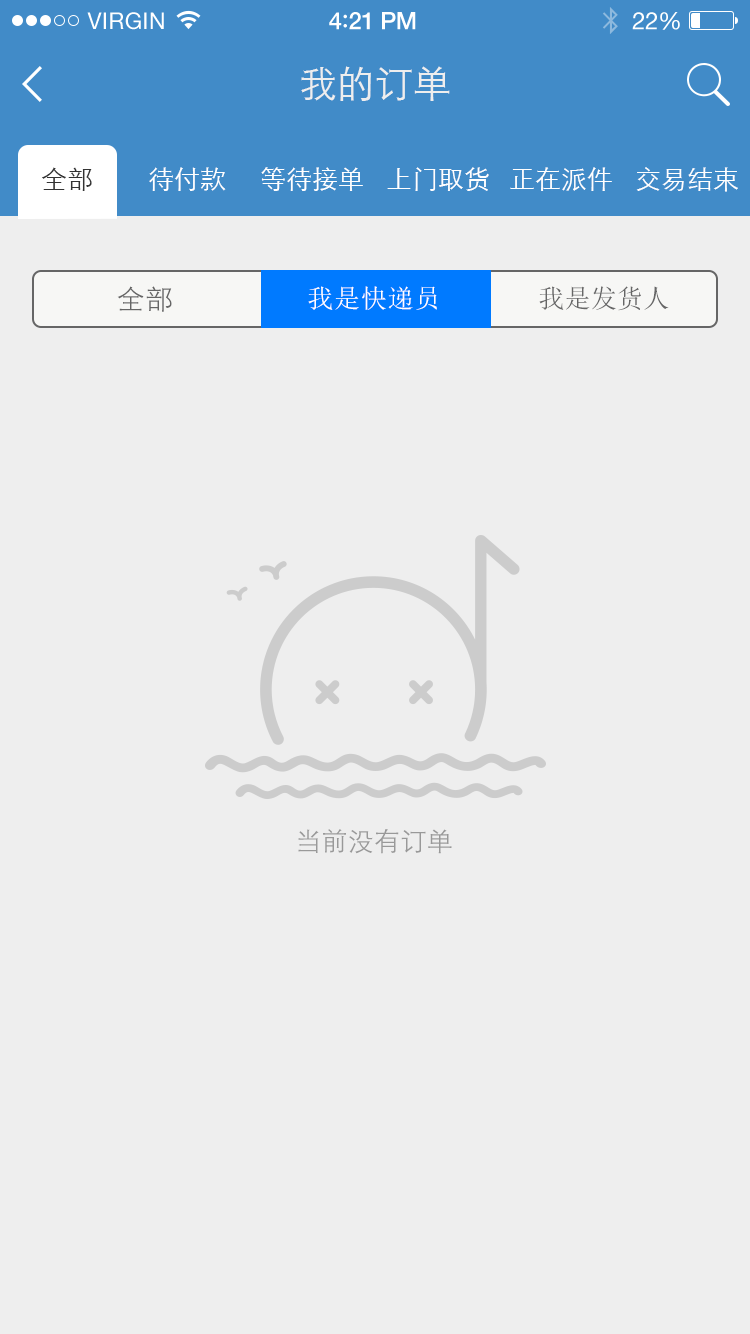
<style>
.page{position:relative;width:750px;height:1334px;background:#eeeeee}
.page>*{position:absolute;margin:0}
.t1{font:23px "HelveticaNeue";letter-spacing:0.02em;color:#ffffff}
.t2{font:24px "HelveticaNeue-Medium";letter-spacing:-0.02em;color:#ffffff}
.t3{font:26px "Avenir-Medium";letter-spacing:-0.02em;color:#ffffff}
.t4{font:24px "HelveticaNeue";letter-spacing:-0.02em;color:#ffffff}
.t5{font:38px "STXihei";color:#eeeeee}
.t6{font:26px "STXihei";color:#333333}
.t7{font:26px "STXihei";color:#ffffff}
.t8{font:28px "STXihei";letter-spacing:0.02em;color:#666666}
.t9{font:26px "SimSun";letter-spacing:0.03em;color:#ffffff}
.t10{font:26px "SimSun";letter-spacing:0.01em;color:#666666}
.t11{font:26px "STXihei";letter-spacing:0.01em;color:#999999}
</style>
<div class="page">
<p class="t1" style="left:87px;top:12px;width:77px;height:18px">VIRGIN</p>
<p class="t2" style="left:329px;top:12px;width:87px;height:18px">4<span class="t3">:</span>21 PM</p>
<p class="t4" style="left:632px;top:12px;width:48px;height:18px">22%</p>
<p class="t5" style="left:301px;top:66px;width:149px;height:35px">我的订单</p>
<p class="t6" style="left:42px;top:167px;width:50px;height:24px">全部</p>
<p class="t7" style="left:149px;top:167px;width:77px;height:24px">待付款</p>
<p class="t7" style="left:261px;top:167px;width:102px;height:24px">等待接单</p>
<p class="t7" style="left:387px;top:167px;width:102px;height:24px">上门取货</p>
<p class="t7" style="left:510px;top:167px;width:102px;height:24px">正在派件</p>
<p class="t7" style="left:636px;top:167px;width:102px;height:25px">交易结束</p>
<p class="t8" style="left:117px;top:286px;width:55px;height:26px">全部</p>
<p class="t9" style="left:308px;top:286px;width:129px;height:24px">我是快递员</p>
<p class="t10" style="left:539px;top:286px;width:130px;height:25px">我是发货人</p>
<p class="t11" style="left:298px;top:829px;width:154px;height:25px">当前没有订单</p>
</div>
